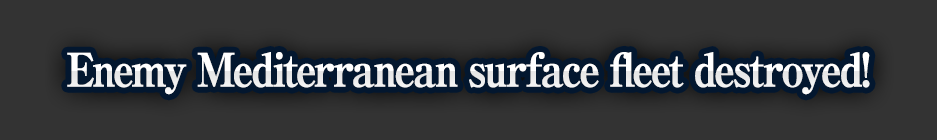
<style>
.page{position:relative;width:937px;height:140px;background:#333333}
.page>*{position:absolute;margin:0}
.t1{font:46px "RyuminPro-ExBold";letter-spacing:-0.08em;color:#ffffff;font-weight:bold;scale:0.9 1}
</style>
<div class="page">
<p class="t1" style="left:67px;top:52px;width:803px;height:43px">Enemy Mediterranean surface fleet destroyed!</p>
</div>
